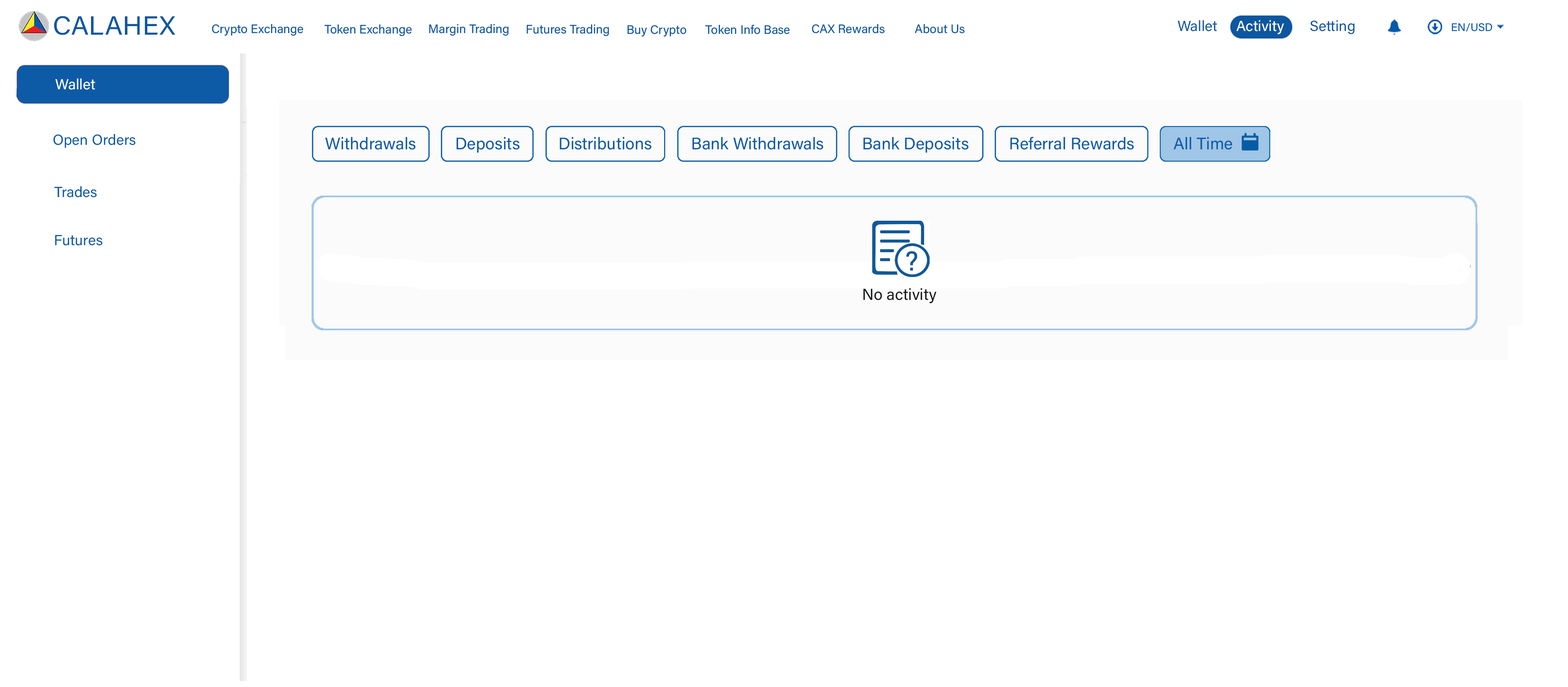
<style>
.page{position:relative;width:1568px;height:687px;background:#ffffff}
.page>*{position:absolute;margin:0}
.t1{font:26.4px "AcuminConcept-Regular";color:#0d57a0;font-style:italic}
.t2{font:12.2px "AcuminConcept-Regular";color:#0d57a0;font-style:italic}
.t3{font:11px "AcuminConcept-Regular";color:#055aaa;font-style:italic}
.t4{font:14.7px "AcuminConcept-Regular";color:#ffffff;font-style:italic}
.t5{font:14.7px "AcuminConcept-Regular";color:#0d5ba6;font-style:italic}
.t6{font:16.7px "AcuminConcept-Regular";color:#0d5ba6;font-style:italic}
.t7{font:15.9px "AcuminConcept-Regular";color:#191b1b;font-style:italic}
</style>
<div class="page">
<p class="t1" style="left:54px;top:16px;width:121px;height:19px">CALAHEX</p>
<p class="t2" style="left:212px;top:24px;width:91px;height:12px">Crypto Exchange</p>
<p class="t2" style="left:324px;top:24px;width:88px;height:12px">Token Exchange</p>
<p class="t2" style="left:429px;top:24px;width:80px;height:12px">Margin Trading</p>
<p class="t2" style="left:526px;top:24px;width:83px;height:12px">Futures Trading</p>
<p class="t2" style="left:627px;top:25px;width:59px;height:12px">Buy Crypto</p>
<p class="t2" style="left:705px;top:24px;width:85px;height:10px">Token Info Base</p>
<p class="t2" style="left:812px;top:24px;width:73px;height:9px">CAX Rewards</p>
<p class="t2" style="left:915px;top:24px;width:50px;height:9px">About Us</p>
<p class="t3" style="left:1452px;top:23px;width:40px;height:9px">EN/USD</p>
<p class="t4" style="left:55px;top:78px;width:40px;height:12px">Wallet</p>
<p class="t5" style="left:53px;top:134px;width:82px;height:14px">Open Orders</p>
<p class="t6" style="left:325px;top:137px;width:90px;height:13px">Withdrawals</p>
<p class="t6" style="left:456px;top:137px;width:64px;height:16px">Deposits</p>
<p class="t6" style="left:560px;top:137px;width:91px;height:13px">Distributions</p>
<p class="t6" style="left:692px;top:137px;width:131px;height:13px">Bank Withdrawals</p>
<p class="t6" style="left:863px;top:137px;width:105px;height:16px">Bank Deposits</p>
<p class="t6" style="left:1010px;top:137px;width:124px;height:13px">Referral Rewards</p>
<p class="t6" style="left:1173px;top:137px;width:59px;height:13px">All Time</p>
<p class="t5" style="left:54px;top:186px;width:43px;height:12px">Trades</p>
<p class="t5" style="left:55px;top:235px;width:47px;height:11px">Futures</p>
<p class="t7" style="left:863px;top:288px;width:74px;height:16px">No activity</p>
</div>
